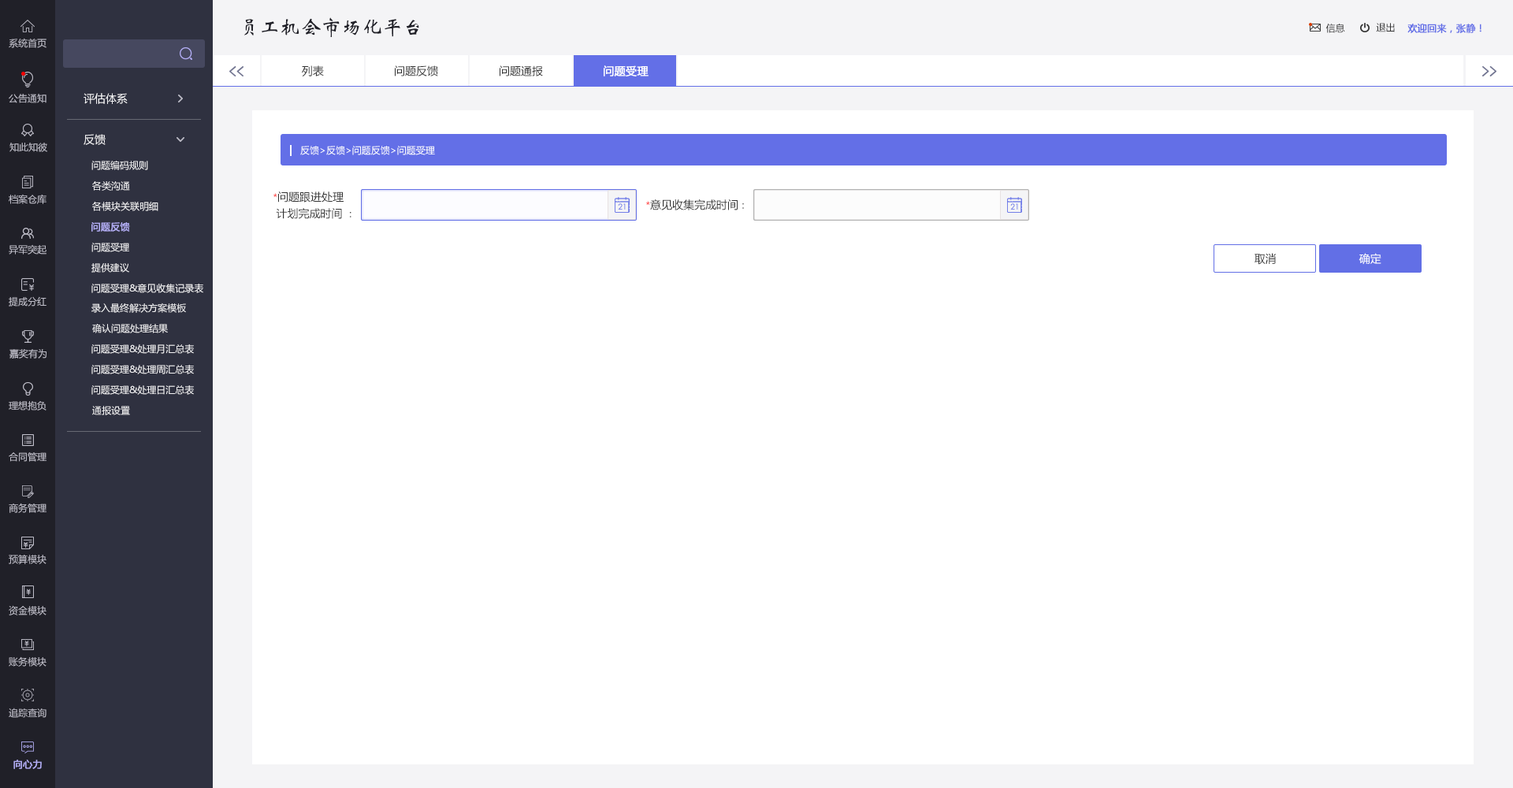
<style>
.page{position:relative;width:1513px;height:788px;background:#ffffff}
.page>*{position:absolute;margin:0}
.t1{font:20.5px "STXinwei";color:#202028}
.t2{font:9.5px "MicrosoftYaHei";color:#333333}
.t3{font:9.5px "MicrosoftYaHei";color:#636fe7;font-weight:bold}
.t4{font:9.5px "MicrosoftYaHei";color:#bfbec9}
.t5{font:11px "MicrosoftYaHei";color:#333333}
.t6{font:11px "MicrosoftYaHei";color:#ffffff;font-weight:bold}
.t7{font:11px "MicrosoftYaHei";color:#f4f4f6}
.t8{font:9.5px "MicrosoftYaHei";color:#ffffff}
.t9{font:9.5px "MicrosoftYaHei";color:#f4f4f6}
.t10{font:11px/11px "MicrosoftYaHei";color:#333333}
.t11{font:9.5px "MicrosoftYaHei";color:#ff0101}
.t12{font:9.5px "MicrosoftYaHei";color:#b3aef5;font-weight:bold}
.t13{font:11px "MicrosoftYaHei";color:#ffffff}
</style>
<div class="page">
<p class="t1" style="left:244px;top:17px;width:175px;height:20px">员工机会市场化平台</p>
<p class="t2" style="left:1326px;top:24px;width:19px;height:9px">信息</p>
<p class="t2" style="left:1376px;top:23px;width:19px;height:9px">退出</p>
<p class="t3" style="left:1407px;top:24px;width:75px;height:9px">欢迎回来，张静！</p>
<p class="t4" style="left:9px;top:38px;width:37px;height:10px">系统首页</p>
<p class="t5" style="left:302px;top:65px;width:22px;height:11px">列表</p>
<p class="t5" style="left:395px;top:65px;width:43px;height:11px">问题反馈</p>
<p class="t5" style="left:500px;top:65px;width:43px;height:11px">问题通报</p>
<p class="t6" style="left:604px;top:65px;width:45px;height:11px">问题受理</p>
<p class="t4" style="left:9px;top:94px;width:37px;height:9px">公告通知</p>
<p class="t7" style="left:84px;top:93px;width:44px;height:11px">评估体系</p>
<p class="t7" style="left:84px;top:134px;width:22px;height:11px">反馈</p>
<p class="t4" style="left:9px;top:143px;width:38px;height:9px">知此知彼</p>
<p class="t8" style="left:300px;top:146px;width:135px;height:9px">反馈&gt;反馈&gt;问题反馈&gt;问题受理</p>
<p class="t9" style="left:91px;top:161px;width:57px;height:9px">问题编码规则</p>
<p class="t9" style="left:92px;top:181px;width:38px;height:10px">各类沟通</p>
<p class="t4" style="left:9px;top:194px;width:37px;height:10px">档案仓库</p>
<p class="t10" style="left:273px;top:192px;width:78px;height:27px"><span class="t11">*</span>问题跟进处理<br> 计划完成时间 <span class="t2">：</span></p>
<p class="t9" style="left:92px;top:202px;width:66px;height:9px">各模块关联明细</p>
<p class="t5" style="left:646px;top:199px;width:98px;height:11px"><span class="t11">*</span>意见收集完成时间<span class="t2">：</span></p>
<p class="t12" style="left:91px;top:222px;width:39px;height:10px">问题反馈</p>
<p class="t4" style="left:9px;top:244px;width:37px;height:11px">异军突起</p>
<p class="t9" style="left:91px;top:243px;width:38px;height:9px">问题受理</p>
<p class="t5" style="left:1255px;top:253px;width:21px;height:12px">取消</p>
<p class="t13" style="left:1359px;top:253px;width:22px;height:12px">确定</p>
<p class="t9" style="left:91px;top:263px;width:38px;height:10px">提供建议</p>
<p class="t9" style="left:91px;top:284px;width:112px;height:9px">问题受理&amp;意见收集记录表</p>
<p class="t4" style="left:9px;top:296px;width:37px;height:11px">提成分红</p>
<p class="t9" style="left:91px;top:303px;width:95px;height:10px">录入最终解决方案模板</p>
<p class="t9" style="left:92px;top:324px;width:76px;height:9px">确认问题处理结果</p>
<p class="t4" style="left:9px;top:349px;width:37px;height:10px">嘉奖有为</p>
<p class="t9" style="left:91px;top:344px;width:103px;height:10px">问题受理&amp;处理月汇总表</p>
<p class="t9" style="left:91px;top:365px;width:103px;height:9px">问题受理&amp;处理周汇总表</p>
<p class="t9" style="left:91px;top:385px;width:103px;height:10px">问题受理&amp;处理日汇总表</p>
<p class="t4" style="left:9px;top:401px;width:37px;height:10px">理想抱负</p>
<p class="t9" style="left:92px;top:406px;width:38px;height:9px">通报设置</p>
<p class="t4" style="left:9px;top:452px;width:37px;height:10px">合同管理</p>
<p class="t4" style="left:9px;top:503px;width:37px;height:10px">商务管理</p>
<p class="t4" style="left:9px;top:555px;width:37px;height:9px">预算模块</p>
<p class="t4" style="left:9px;top:605px;width:37px;height:10px">资金模块</p>
<p class="t4" style="left:9px;top:656px;width:37px;height:11px">账务模块</p>
<p class="t4" style="left:9px;top:708px;width:37px;height:10px">追踪查询</p>
<p class="t12" style="left:13px;top:760px;width:29px;height:9px">向心力</p>
</div>
